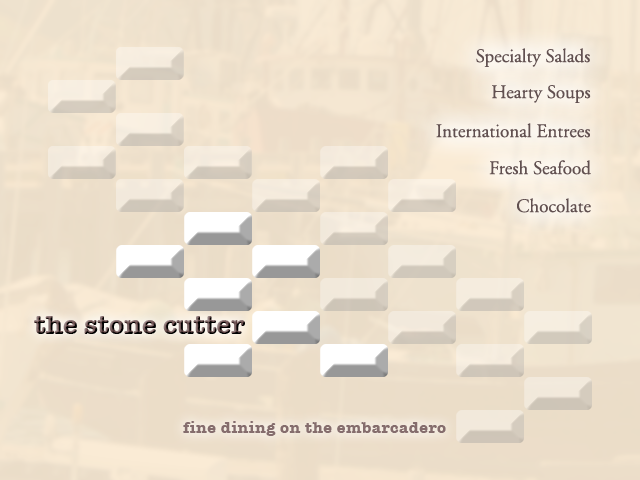
<style>
.page{position:relative;width:640px;height:480px}
.page>*{position:absolute;margin:0}
.t1{font:19px "AGaramond-Regular";color:#615050}
</style>
<div class="page">
<p class="t1" style="left:476px;top:48px;width:114px;height:19px">Specialty Salads</p>
<p class="t1" style="left:492px;top:85px;width:99px;height:18px">Hearty Soups</p>
<p class="t1" style="left:436px;top:123px;width:154px;height:15px">International Entrees</p>
<p class="t1" style="left:489px;top:160px;width:102px;height:15px">Fresh Seafood</p>
<p class="t1" style="left:517px;top:198px;width:74px;height:15px">Chocolate</p>
</div>
